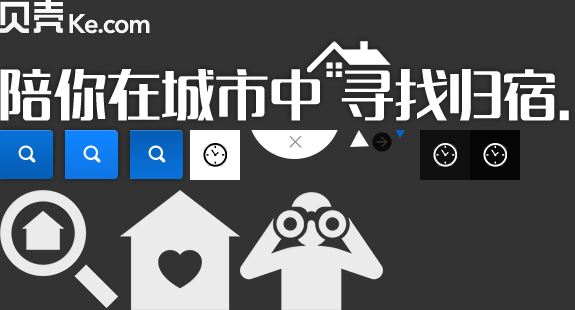
<style>
.page{position:relative;width:575px;height:310px;background:#333333}
.page>*{position:absolute;margin:0}
.t1{font:26.3px "AvenirNext-DemiBold";letter-spacing:-0.05em;color:#ffffff}
.t2{font:54px "MFLangQian_Noncommercial-Regular";color:#ffffff;text-transform:uppercase}
.t3{font:29px "STXingkai-SC-Light";color:#999999}
</style>
<div class="page">
<p class="t1" style="left:69px;top:14px;width:81px;height:20px">Ke.com</p>
<p class="t2" style="left:0px;top:69px;width:569px;height:52px">陪你在城市中 寻找归宿.</p>
<p class="t3" style="left:289px;top:135px;width:13px;height:13px;rotate:45deg">+</p>
</div>
